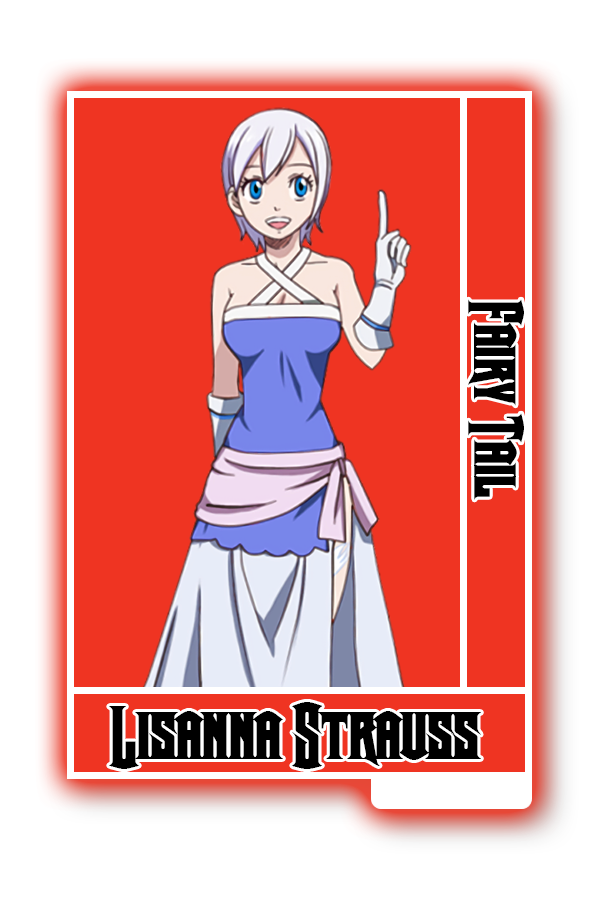
<style>
.page{position:relative;width:600px;height:900px;background:#ef3422}
.page>*{position:absolute;margin:0}
.t1{font:61.5px "Crown-Title";color:#000000}
.t2{font:70.1px "Crown-Title";color:#000000}
</style>
<div class="page">
<p class="t1" style="left:468px;top:299px;width:56px;height:201px;rotate:90deg">Fairy Tail</p>
<p class="t2" style="left:109px;top:702px;width:372px;height:67px">Lisanna Strauss</p>
</div>
